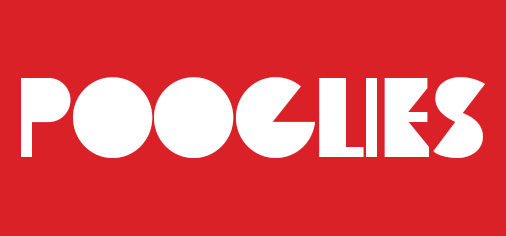
<style>
.page{position:relative;width:506px;height:236px;background:#da2127}
.page>*{position:absolute;margin:0}
.t1{font:111px "HWTMardell";letter-spacing:-0.04em;color:#ffffff}
</style>
<div class="page">
<p class="t1" style="left:21px;top:77px;width:464px;height:81px">Pooglies</p>
</div>
